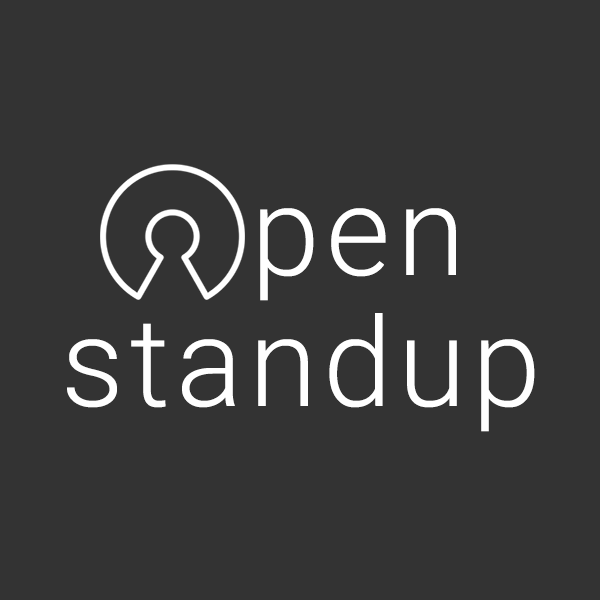
<style>
.page{position:relative;width:600px;height:600px;background:#333333}
.page>*{position:absolute;margin:0}
.t1{font:124px "Roboto-Light";letter-spacing:0.05em;color:#ffffff}
</style>
<div class="page">
<p class="t1" style="left:260px;top:208px;width:196px;height:93px">pen</p>
<p class="t1" style="left:67px;top:313px;width:468px;height:119px">standup</p>
</div>
